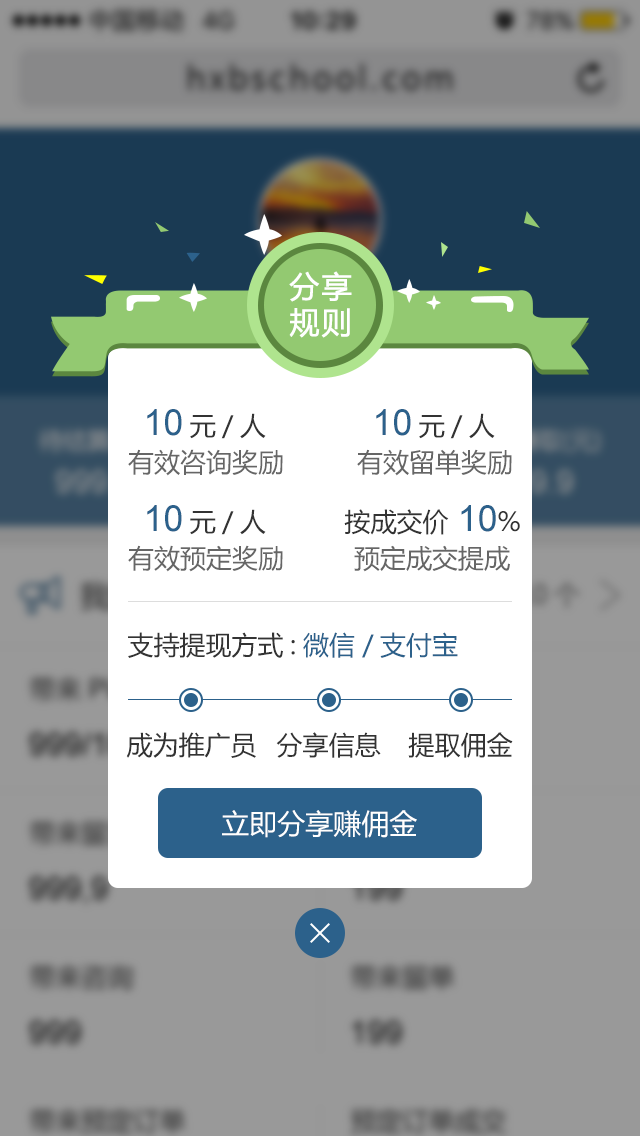
<style>
.page{position:relative;width:640px;height:1136px;background:#ffffff}
.page>*{position:absolute;margin:0}
.t1{font:30px/36px "MicrosoftYaHei";letter-spacing:0.05em;color:#ffffff;font-weight:bold}
.t2{font:26px "MicrosoftYaHei";color:#333333}
.t3{font:36px "ArialMT";color:#2c618b}
.t4{font:26px "MicrosoftYaHei";color:#666666}
.t5{font:26px "MicrosoftYaHei";color:#2c618b}
.t6{font:28px "MicrosoftYaHei";color:#ffffff}
</style>
<div class="page">
<p class="t1" style="left:289px;top:271px;width:63px;height:67px;text-align:center">分享<br>规则</p>
<p class="t2" style="left:147px;top:409px;width:119px;height:30px"><span class="t3">10</span>元/人</p>
<p class="t2" style="left:376px;top:409px;width:119px;height:30px"><span class="t3">10</span>元/人</p>
<p class="t4" style="left:128px;top:449px;width:155px;height:27px">有效咨询奖励</p>
<p class="t4" style="left:357px;top:449px;width:155px;height:27px">有效留单奖励</p>
<p class="t2" style="left:147px;top:505px;width:119px;height:30px"><span class="t3">10</span>元/人</p>
<p class="t2" style="left:344px;top:505px;width:176px;height:30px">按成交价<span class="t3">10</span>%</p>
<p class="t4" style="left:128px;top:545px;width:155px;height:27px">有效预定奖励</p>
<p class="t4" style="left:354px;top:545px;width:156px;height:27px">预定成交提成</p>
<p class="t2" style="left:128px;top:632px;width:330px;height:26px">支持提现方式:<span class="t5">微信 /支付宝</span></p>
<p class="t2" style="left:126px;top:732px;width:130px;height:26px">成为推广员</p>
<p class="t2" style="left:276px;top:732px;width:105px;height:26px">分享信息</p>
<p class="t2" style="left:408px;top:732px;width:105px;height:26px">提取佣金</p>
<p class="t6" style="left:222px;top:810px;width:195px;height:28px">立即分享赚佣金</p>
</div>
